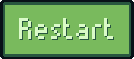
<style>
.page{position:relative;width:134px;height:59px;background:#79ba5d}
.page>*{position:absolute;margin:0}
.t1{font:30.5px "Munro";letter-spacing:0.025em;color:#dafac8}
.t2{font:30.5px "Munro";letter-spacing:0.025em}
</style>
<div class="page">
<p class="t1" style="left:19px;top:18px;width:94px;height:21px">Restart</p>
<p class="t2" style="left:20px;top:19px;width:94px;height:21px">Restart</p>
</div>
